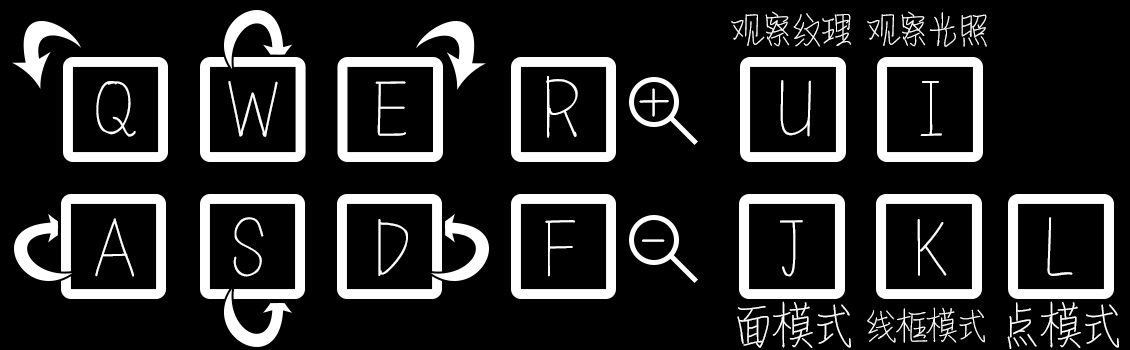
<style>
.page{position:relative;width:1130px;height:350px;background:#000000}
.page>*{position:absolute;margin:0}
.t1{font:36px "MFQingShu_Noncommercial-Regular";color:#ffffff}
.t2{font:67px "MFQingShu_Noncommercial-Regular";color:#ffffff}
.t3{font:74.5px "MFQingShu_Noncommercial-Regular";color:#ffffff}
.t4{font:47.8px "MFQingShu_Noncommercial-Regular";color:#ffffff}
</style>
<div class="page">
<p class="t1" style="left:731px;top:11px;width:120px;height:36px">观察纹理</p>
<p class="t1" style="left:867px;top:11px;width:120px;height:36px">观察光照</p>
<p class="t2" style="left:546px;top:76px;width:32px;height:62px">R</p>
<p class="t2" style="left:96px;top:81px;width:40px;height:56px">Q</p>
<p class="t2" style="left:228px;top:81px;width:50px;height:56px">W</p>
<p class="t2" style="left:375px;top:81px;width:31px;height:55px">E</p>
<p class="t3" style="left:639px;top:88px;width:30px;height:29px">+</p>
<p class="t2" style="left:780px;top:80px;width:31px;height:57px">U</p>
<p class="t2" style="left:920px;top:81px;width:22px;height:55px">I</p>
<p class="t2" style="left:95px;top:218px;width:39px;height:59px">A</p>
<p class="t2" style="left:233px;top:217px;width:31px;height:60px">S</p>
<p class="t2" style="left:378px;top:219px;width:30px;height:57px">D</p>
<p class="t2" style="left:545px;top:220px;width:30px;height:57px">F</p>
<p class="t2" style="left:780px;top:220px;width:23px;height:57px">J</p>
<p class="t2" style="left:917px;top:219px;width:30px;height:57px">K</p>
<p class="t2" style="left:1047px;top:217px;width:26px;height:59px">L</p>
<p class="t3" style="left:642px;top:239px;width:23px;height:3px">-</p>
<p class="t4" style="left:737px;top:301px;width:114px;height:47px">面模式</p>
<p class="t4" style="left:1007px;top:301px;width:112px;height:48px">点模式</p>
<p class="t1" style="left:867px;top:307px;width:118px;height:36px">线框模式</p>
</div>
